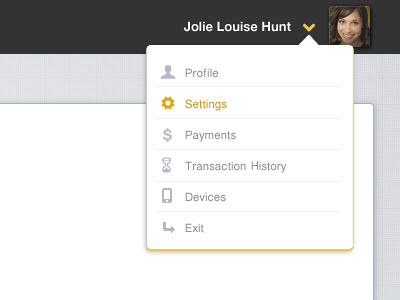
<style>
.page{position:relative;width:400px;height:300px;background:#ffffff}
.page>*{position:absolute;margin:0}
.t1{font:13px "HelveticaNeue-Bold";color:#ffffff}
.t2{font:13px/31px "Helen-BG-Normal";color:#8a8e9a}
.t3{font:13px/31px "Helen-BG-Normal";color:#d09514}
</style>
<div class="page">
<p class="t1" style="left:184px;top:21px;width:107px;height:11px">Jolie Louise Hunt</p>
<p class="t2" style="left:185px;top:68px;width:102px;height:165px">Profile<br><span class="t3">Settings<br></span>Payments<br>Transaction History<br>Devices<br>Exit</p>
</div>
